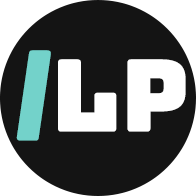
<style>
.page{position:relative;width:196px;height:196px;background:#141414}
.page>*{position:absolute;margin:0}
.t1{font:100px "Bungee-Regular";color:#ffffff}
.t2{font:100px "Bungee-Regular";color:#73d2ca}
</style>
<div class="page">
<p class="t1" style="left:16px;top:50px;width:170px;height:91px"><span class="t2">/</span>LP</p>
</div>
